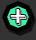
<style>
.page{position:relative;width:36px;height:40px;background:#333333}
.page>*{position:absolute;margin:0}
.t1{font:34.6px "Algerian";color:#ffffff}
</style>
<div class="page">
<p class="t1" style="left:10px;top:9px;width:17px;height:16px">+</p>
</div>
